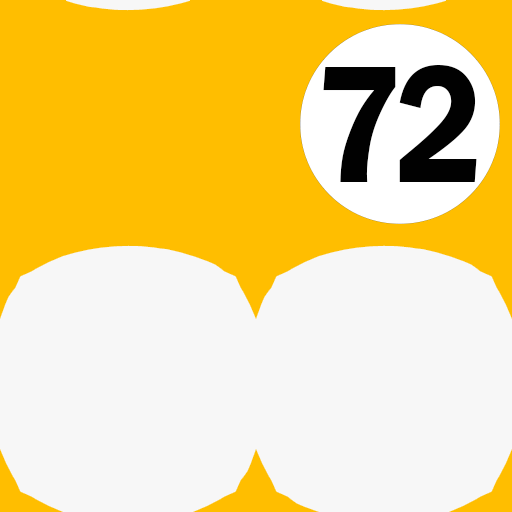
<style>
.page{position:relative;width:512px;height:512px;background:#f7f7f7}
.page>*{position:absolute;margin:0}
.t1{font:172.5px "FranklinGothic-Demi";letter-spacing:-0.05em;color:#010101;scale:0.87 1}
</style>
<div class="page">
<p class="t1" style="left:323px;top:65px;width:154px;height:117px">72</p>
</div>
